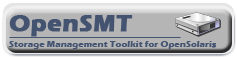
<style>
.page{position:relative;width:237px;height:57px;background:#b5b5b5}
.page>*{position:absolute;margin:0}
.t1{font:24px "ErasITC-Bold";letter-spacing:0.005em;color:#435370;font-weight:bold}
.t2{font:9px "ErasITC-Bold";letter-spacing:0.005em;color:#435370}
.t3{font:9px "ErasITC-Bold";letter-spacing:0.005em;color:#435370;font-weight:bold}
</style>
<div class="page">
<p class="t1" style="left:9px;top:15px;width:124px;height:22px">OpenSMT</p>
<p class="t2" style="left:9px;top:41px;width:207px;height:8px">Storage Management Toolkit for OpenSolari<span class="t3">s</span></p>
</div>
